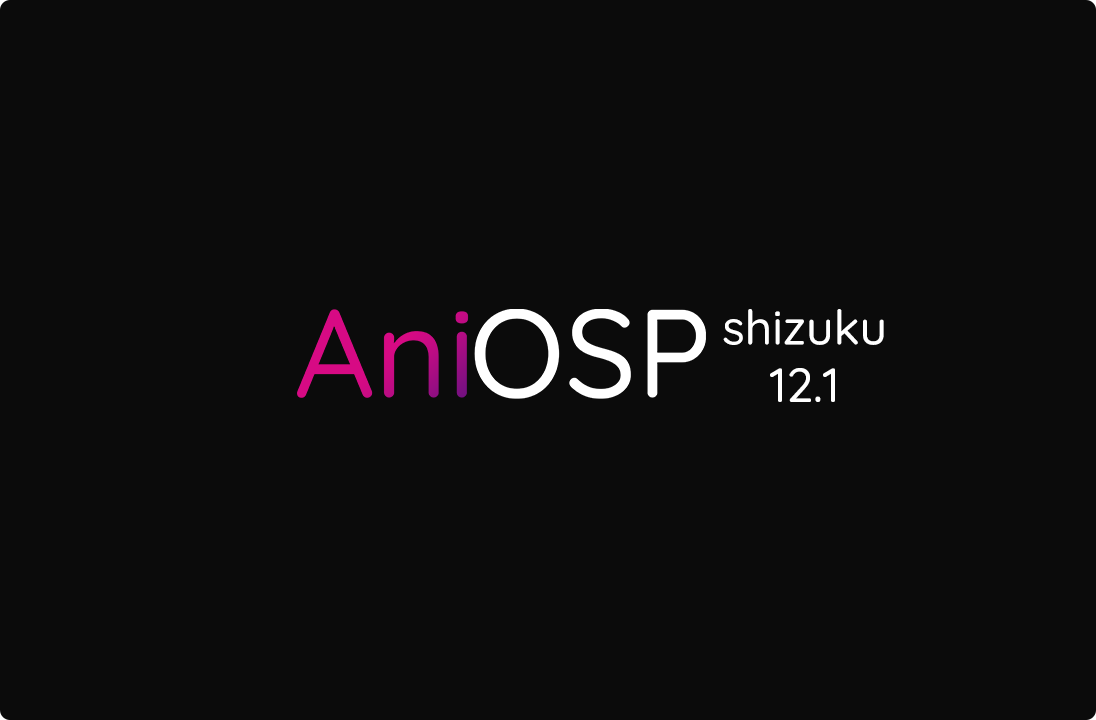
<style>
.page{position:relative;width:1096px;height:720px;background:#0b0b0b}
.page>*{position:absolute;margin:0}
.t1{font:48px "Quicksand-Medium";color:#ffffff}
</style>
<div class="page">
<p class="t1" style="left:723px;top:309px;width:161px;height:93px;text-align:center">shizuku<br>12.1<br><br>12</p>
</div>
